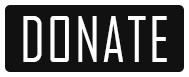
<style>
.page{position:relative;width:189px;height:77px;background:#111111}
.page>*{position:absolute;margin:0}
.t1{font:60px "AgencyFB-Reg";letter-spacing:0.04em;color:#ffffff;scale:0.95 1}
</style>
<div class="page">
<p class="t1" style="left:23px;top:16px;width:144px;height:46px">DONATE</p>
</div>
